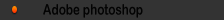
<style>
.page{position:relative;width:224px;height:20px;background:#333333}
.page>*{position:absolute;margin:0}
.t1{font:14.9px "ArialRoundedMTBold";color:#030303;scale:0.78 1}
</style>
<div class="page">
<p class="t1" style="left:43px;top:4px;width:100px;height:14px">Adobe photoshop</p>
</div>
